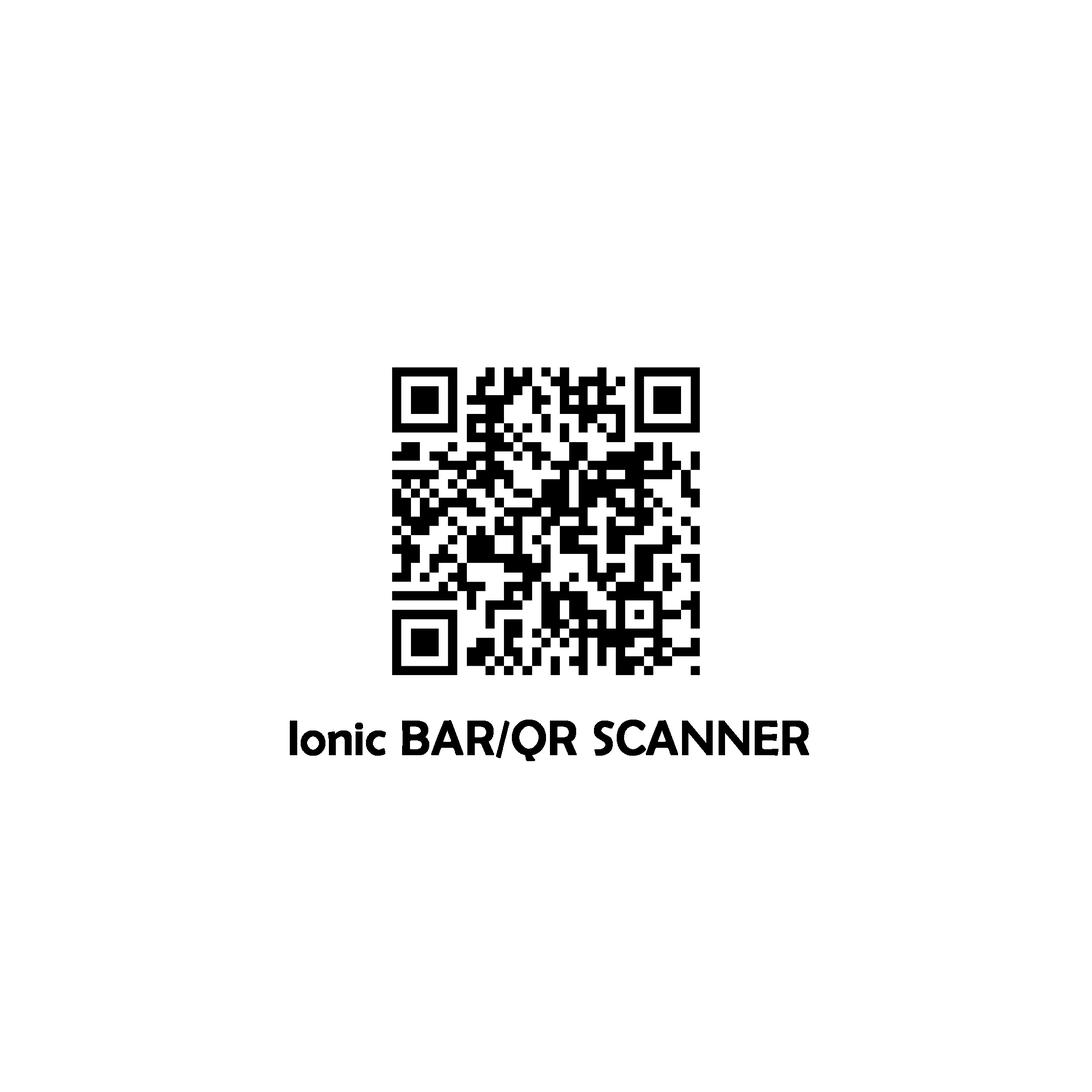
<style>
.page{position:relative;width:1092px;height:1092px;background:#ffffff}
.page>*{position:absolute;margin:0}
.t1{font:48.9px "BerlinSansFB-Reg";color:#000000;font-weight:bold}
</style>
<div class="page">
<p class="t1" style="left:290px;top:720px;width:519px;height:41px">Ionic BAR/QR SCANNER</p>
</div>
